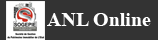
<style>
.page{position:relative;width:158px;height:40px;background:#333333}
.page>*{position:absolute;margin:0}
.t1{font:20px "TimesNewRomanPS-BoldMT";color:#ffffff}
</style>
<div class="page">
<p class="t1" style="left:47px;top:13px;width:104px;height:13px">ANL Online</p>
</div>
